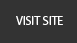
<style>
.page{position:relative;width:77px;height:43px;background:#333333}
.page>*{position:absolute;margin:0}
.t1{font:12px "MyriadPro-Regular";color:#ffffff}
</style>
<div class="page">
<p class="t1" style="left:16px;top:16px;width:47px;height:9px">VISIT SITE</p>
</div>
